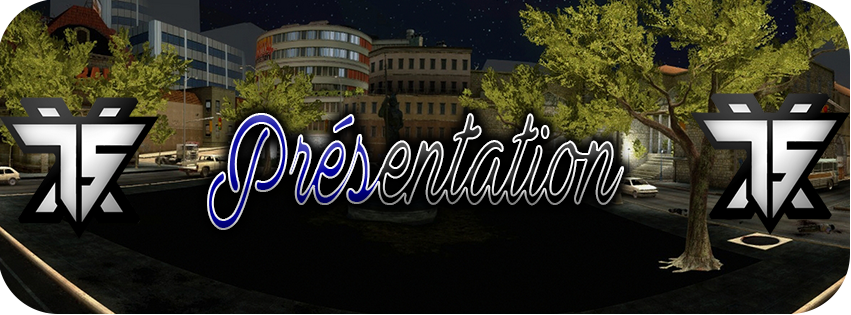
<style>
.page{position:relative;width:851px;height:315px}
.page>*{position:absolute;margin:0}
.t1{font:145.8px "ActoniaPERSONALUSE";scale:0.61 1}
</style>
<div class="page">
<p class="t1" style="left:207px;top:113px;width:417px;height:117px">Présentation</p>
</div>
